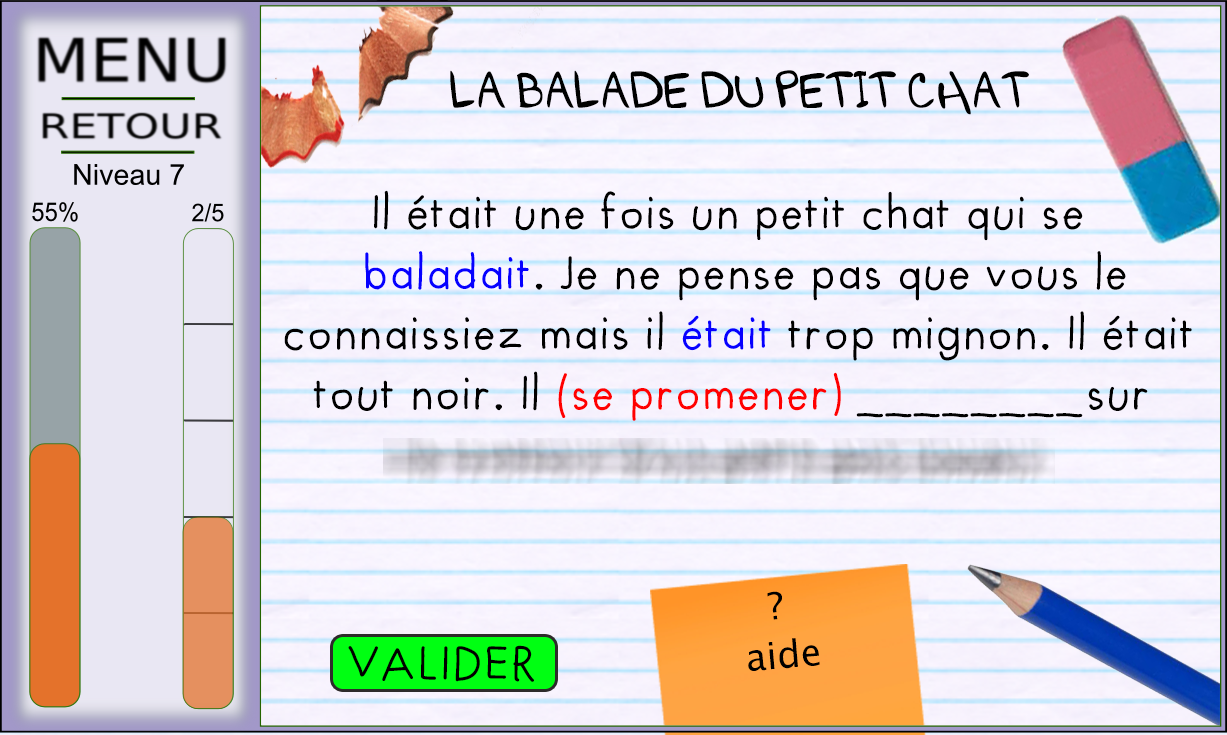
<style>
.page{position:relative;width:1227px;height:735px}
.page>*{position:absolute;margin:0}
.t1{font:45px "FuturaHandwritten";color:#000000}
.t2{font:45px "GoBoom!";color:#000000}
.t3{font:45px "FuturaHandwritten";color:#0600ff}
.t4{font:45px "FuturaHandwritten";color:#ff0000}
.t5{font:37.5px "LucidaSansUnicode";color:#000000}
</style>
<div class="page">
<p class="t1" style="left:284px;top:70px;width:908px;height:351px;text-align:center"><span class="t2">LA BALADE DU PETIT CHAT<br><br>          </span>Il était une fois un petit chat qui se      <br><span class="t3">baladait</span>. Je ne pense pas que vous le <br>connaissiez mais il <span class="t3">était</span> trop mignon. Il était<br> tout noir. Il <span class="t4">(se promener)</span> ________sur</p>
<p class="t5" style="left:767px;top:591px;width:15px;height:29px">?</p>
<p class="t5" style="left:748px;top:638px;width:72px;height:33px;rotate:2deg">aide</p>
<p class="t1" style="left:348px;top:645px;width:186px;height:37px">VALIDER</p>
</div>
